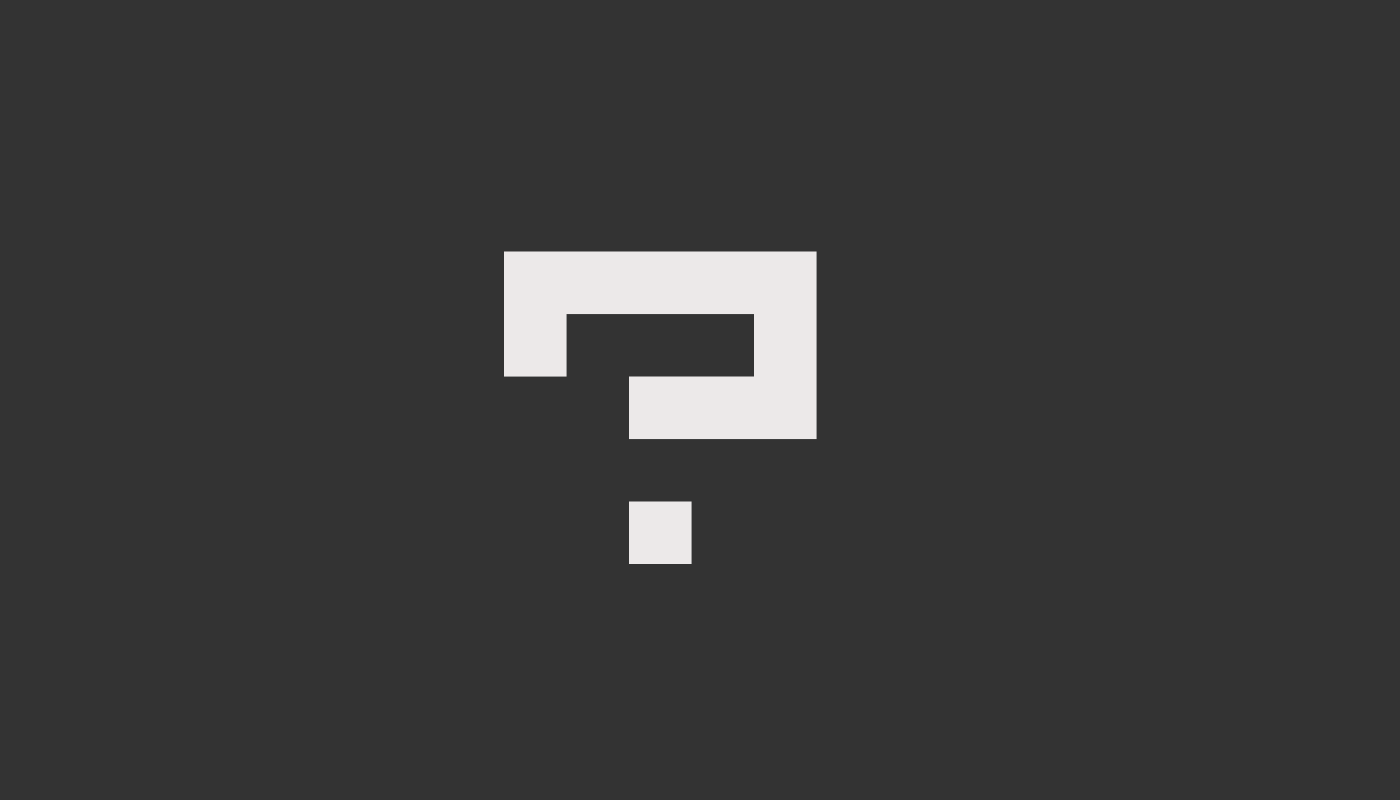
<style>
.page{position:relative;width:1400px;height:800px;background:#333333}
.page>*{position:absolute;margin:0}
.t1{font:500px "BIGBLOCKS";color:#ece9e9}
</style>
<div class="page">
<p class="t1" style="left:504px;top:251px;width:313px;height:313px">?</p>
</div>
